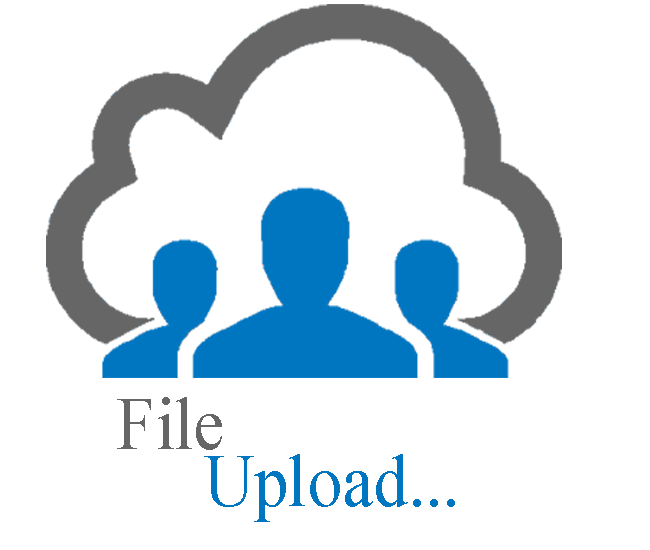
<style>
.page{position:relative;width:650px;height:550px;background:#ffffff}
.page>*{position:absolute;margin:0}
.t1{font:75.4px/56.6px "TimesNewRomanPSMT";color:#0076c1;scale:0.92 1}
.t2{font:75.4px/56.6px "TimesNewRomanPSMT";color:#666666;scale:0.92 1}
</style>
<div class="page">
<p class="t1" style="left:117px;top:397px;width:338px;height:125px"><span class="t2">File <br>     </span>Upload...</p>
</div>
